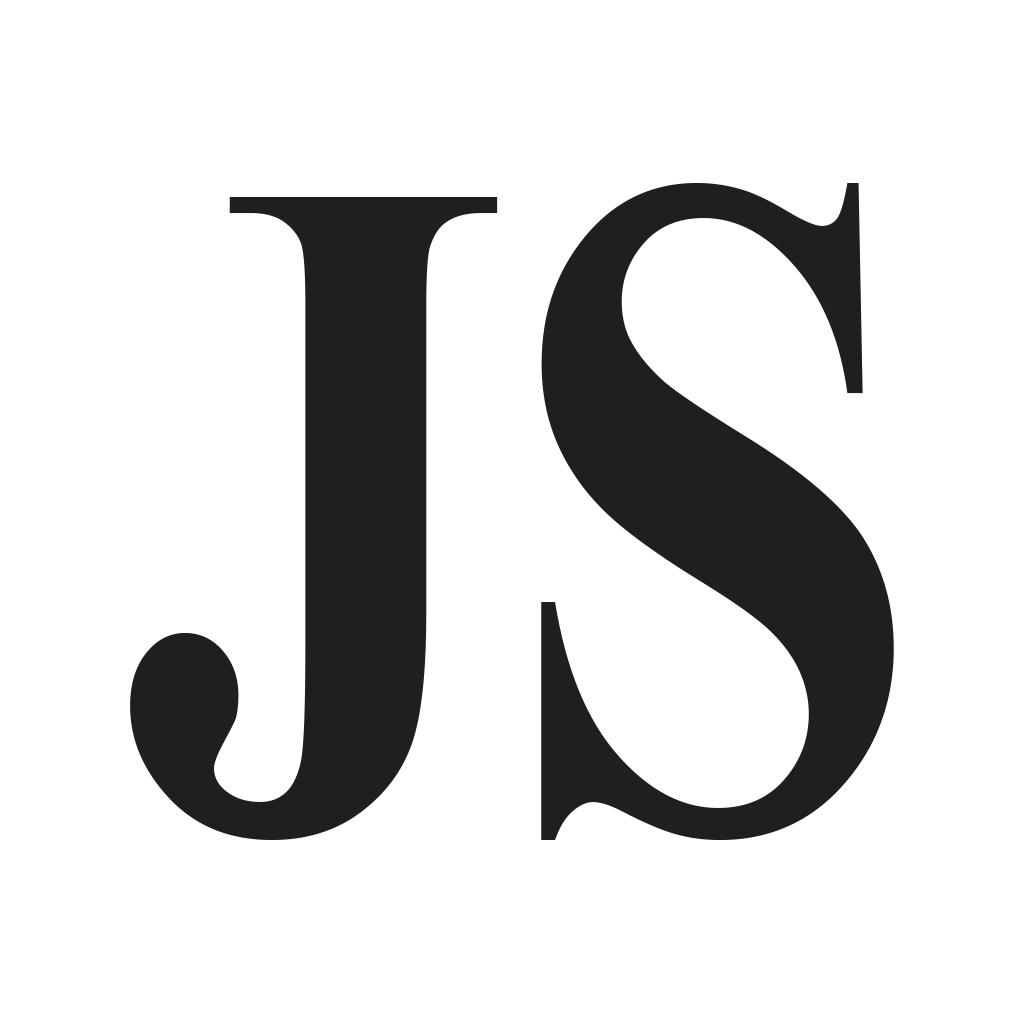
<style>
.page{position:relative;width:1024px;height:1024px;background:#ffffff}
.page>*{position:absolute;margin:0}
.t1{font:950.1px "TimesNewRomanPS-BoldMT";color:#1f1f1f;scale:0.8 1}
</style>
<div class="page">
<p class="t1" style="left:130px;top:183px;width:764px;height:657px">JS</p>
</div>
